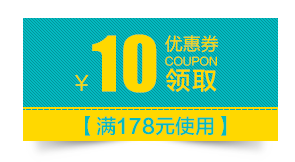
<style>
.page{position:relative;width:295px;height:162px;background:#ffffff}
.page>*{position:absolute;margin:0}
.t1{font:92px "UUSUKKUFI_1-Bold";color:#ffd800}
.t2{font:18px "FZLTHJW--GB1-0";color:#ffd800}
.t3{font:11px "FZLTKHK--GBK1-0";color:#ffd800}
.t4{font:20px "FZLTHJW--GB1-0";color:#ffd800}
.t5{font:25px "FZLTZHK--GBK1-0";letter-spacing:0.05em;color:#ffd800}
.t6{font:20px "FZLTZHK--GBK1-0";color:#03bac1}
</style>
<div class="page">
<p class="t1" style="left:92px;top:34px;width:65px;height:59px">10</p>
<p class="t2" style="left:165px;top:35px;width:54px;height:18px">优惠券</p>
<p class="t3" style="left:165px;top:56px;width:52px;height:10px">COUPON</p>
<p class="t4" style="left:75px;top:74px;width:14px;height:17px">￥</p>
<p class="t5" style="left:166px;top:68px;width:51px;height:24px">领取</p>
<p class="t6" style="left:85px;top:116px;width:142px;height:20px">【满178元使用】</p>
</div>
